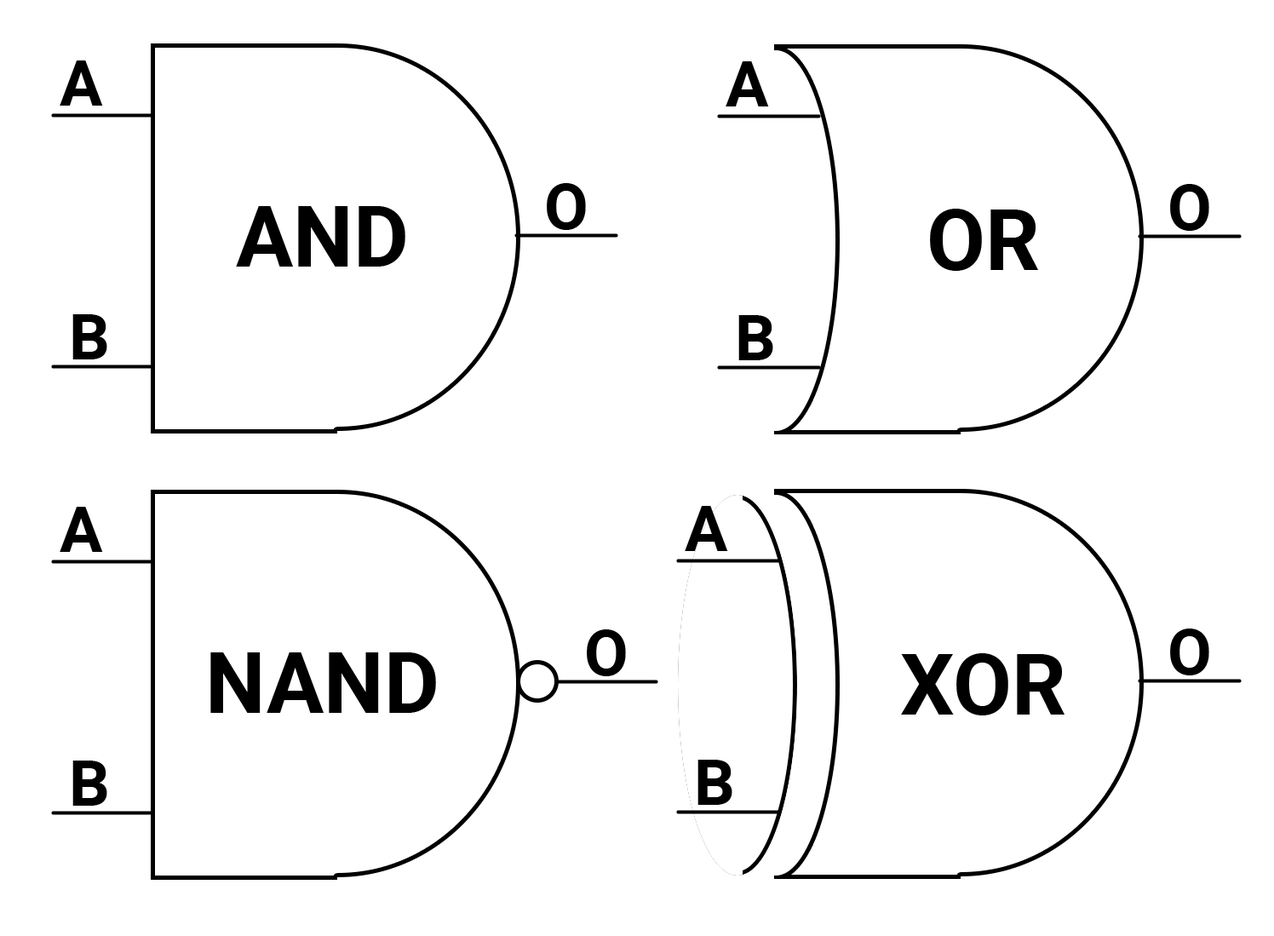
<style>
.page{position:relative;width:1274px;height:936px;background:#ffffff}
.page>*{position:absolute;margin:0}
.t1{font:63.9px "Roboto-Bold";color:#000000}
.t2{font:85.2px "Roboto-Bold";color:#000000}
</style>
<div class="page">
<p class="t1" style="left:60px;top:60px;width:43px;height:46px">A</p>
<p class="t1" style="left:726px;top:61px;width:43px;height:45px">A</p>
<p class="t1" style="left:547px;top:183px;width:39px;height:47px">O</p>
<p class="t1" style="left:1170px;top:184px;width:39px;height:47px">O</p>
<p class="t2" style="left:236px;top:206px;width:169px;height:61px">AND</p>
<p class="t2" style="left:930px;top:209px;width:108px;height:62px">OR</p>
<p class="t1" style="left:72px;top:314px;width:35px;height:45px">B</p>
<p class="t1" style="left:738px;top:315px;width:35px;height:45px">B</p>
<p class="t1" style="left:60px;top:507px;width:43px;height:45px">A</p>
<p class="t1" style="left:685px;top:506px;width:43px;height:45px">A</p>
<p class="t1" style="left:587px;top:629px;width:39px;height:47px">O</p>
<p class="t1" style="left:1170px;top:629px;width:39px;height:46px">O</p>
<p class="t2" style="left:210px;top:652px;width:226px;height:61px">NAND</p>
<p class="t2" style="left:901px;top:653px;width:164px;height:62px">XOR</p>
<p class="t1" style="left:72px;top:761px;width:35px;height:45px">B</p>
<p class="t1" style="left:697px;top:760px;width:35px;height:45px">B</p>
</div>
